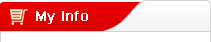
<style>
.page{position:relative;width:211px;height:42px;background:#ffffff}
.page>*{position:absolute;margin:0}
.t1{font:14px "ArialMT";letter-spacing:0.025em;color:#ffffff;font-weight:bold}
</style>
<div class="page">
<p class="t1" style="left:36px;top:11px;width:52px;height:13px">My Info</p>
</div>
